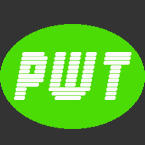
<style>
.page{position:relative;width:145px;height:145px;background:#333333}
.page>*{position:absolute;margin:0}
.t1{font:52.3px "Abduction2000";letter-spacing:0.1em;color:#fbfcfa;scale:0.87 1}
</style>
<div class="page">
<p class="t1" style="left:14px;top:52px;width:118px;height:48px">PWT</p>
</div>
